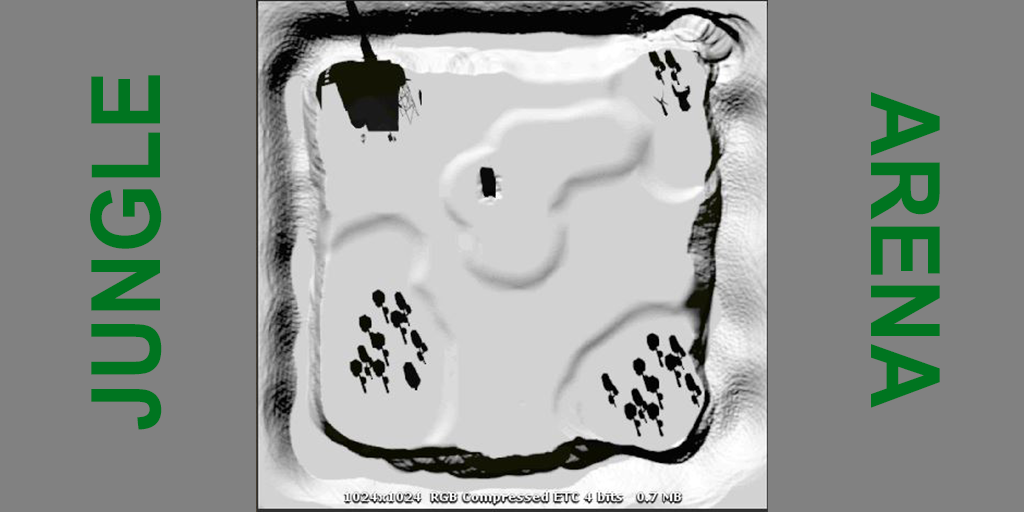
<style>
.page{position:relative;width:1024px;height:512px;background:#818181}
.page>*{position:absolute;margin:0}
.t1{font:96px "Arial-BoldMT";color:#007520;scale:0.93 1}
</style>
<div class="page">
<p class="t1" style="left:90px;top:75px;width:72px;height:355px;rotate:-90deg">JUNGLE</p>
<p class="t1" style="left:871px;top:92px;width:69px;height:316px;rotate:90deg">ARENA</p>
</div>
